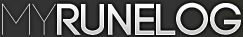
<style>
.page{position:relative;width:243px;height:37px}
.page>*{position:absolute;margin:0}
.t1{font:45px "Code-Bold";color:#f0f0f0}
.t2{font:45px "Code-Light";color:#f0f0f0}
</style>
<div class="page">
<p class="t1" style="left:2px;top:2px;width:239px;height:33px"><span class="t2">My</span>RuneLog</p>
</div>
